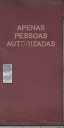
<style>
.page{position:relative;width:64px;height:128px}
.page>*{position:absolute;margin:0}
.t1{font:6.7px "ArialMT";letter-spacing:0.02em;color:#a68478}
</style>
<div class="page">
<p class="t1" style="left:6px;top:25px;width:49px;height:22px;text-align:center">APENAS<br>PESSOAS<br>AUTORIZADAS</p>
</div>
